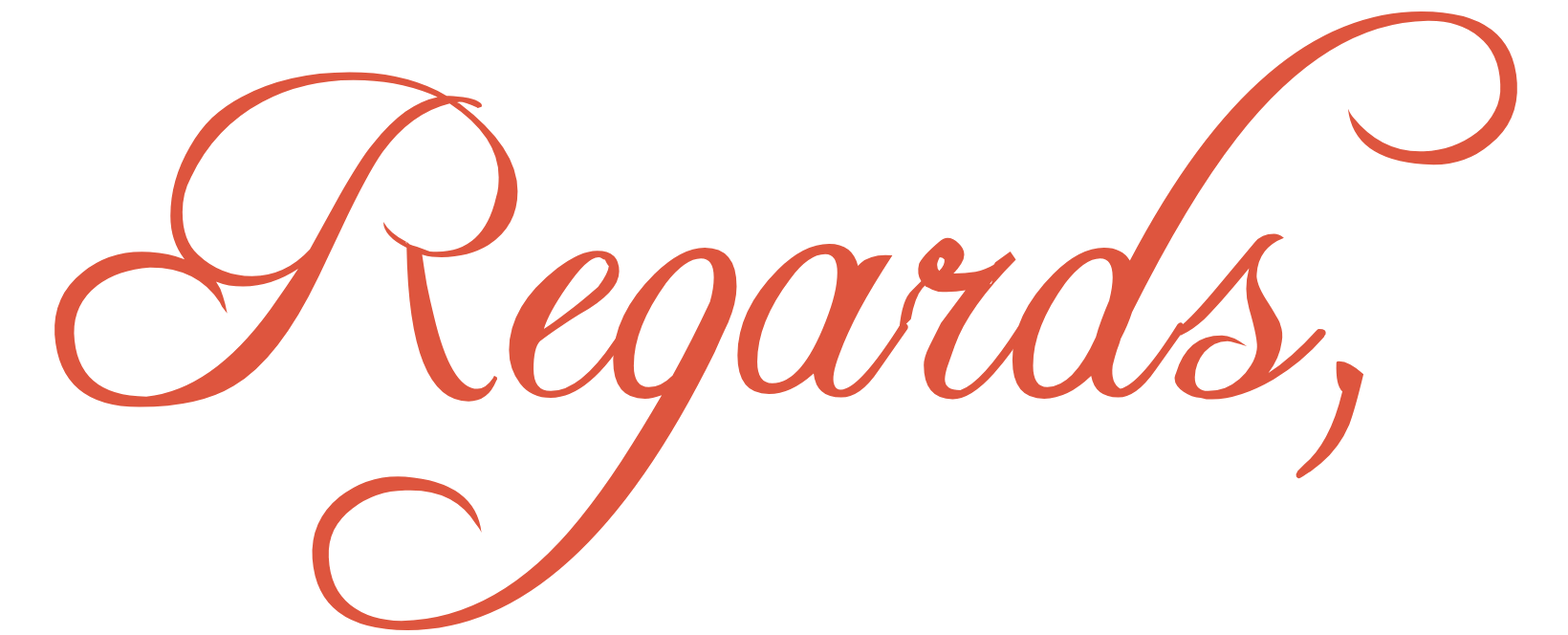
<style>
.page{position:relative;width:1568px;height:635px;background:#ffffff}
.page>*{position:absolute;margin:0}
.t1{font:430.2px "FreebooterScript";color:#de553e}
</style>
<div class="page">
<p class="t1" style="left:52px;top:11px;width:1468px;height:620px">Regards,</p>
</div>
